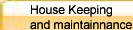
<style>
.page{position:relative;width:133px;height:30px}
.page>*{position:absolute;margin:0}
.t1{font:12.1px "ArialMT";color:#040404}
</style>
<div class="page">
<p class="t1" style="left:30px;top:5px;width:102px;height:24px">House Keeping <br>and maintainnance</p>
</div>
